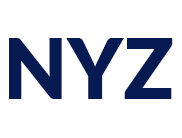
<style>
.page{position:relative;width:182px;height:138px;background:#ffffff}
.page>*{position:absolute;margin:0}
.t1{font:83.3px "Lato-Black";color:#081a52}
</style>
<div class="page">
<p class="t1" style="left:9px;top:38px;width:164px;height:61px">NYZ</p>
</div>
